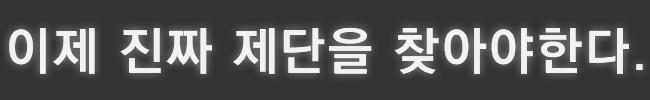
<style>
.page{position:relative;width:650px;height:100px;background:#333333}
.page>*{position:absolute;margin:0}
.t1{font:51.5px "KoPubDotumBold";letter-spacing:0.06em;color:#f2f2f2}
.t2{font:45.8px "KoPubDotumBold";letter-spacing:0.06em;color:#f2f2f2}
</style>
<div class="page">
<p class="t1" style="left:9px;top:27px;width:634px;height:47px">이제 진짜 제단을 찾아야한다<span class="t2">.</span></p>
</div>
